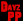
<style>
.page{position:relative;width:23px;height:21px;background:#000000}
.page>*{position:absolute;margin:0}
.t1{font:13.3px "28DaysLater";color:#e50303}
.t2{font:8px "28DaysLater";color:#e50303}
</style>
<div class="page">
<p class="t1" style="left:1px;top:1px;width:7px;height:11px">D</p>
<p class="t2" style="left:7px;top:4px;width:13px;height:7px">ayz</p>
<p class="t1" style="left:7px;top:11px;width:15px;height:11px">PP</p>
</div>
